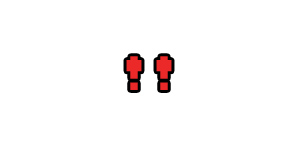
<style>
.page{position:relative;width:300px;height:150px;background:#ffffff}
.page>*{position:absolute;margin:0}
.t1{font:48px "Fixedsys";color:#eb2929}
</style>
<div class="page">
<p class="t1" style="left:126px;top:56px;width:46px;height:34px">!!</p>
</div>
